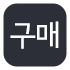
<style>
.page{position:relative;width:70px;height:70px;background:#2c2f38}
.page>*{position:absolute;margin:0}
.t1{font:29.1px "SeoulNamsanB";letter-spacing:-0.02em;color:#ffffff}
</style>
<div class="page">
<p class="t1" style="left:10px;top:21px;width:49px;height:28px">구매</p>
</div>
